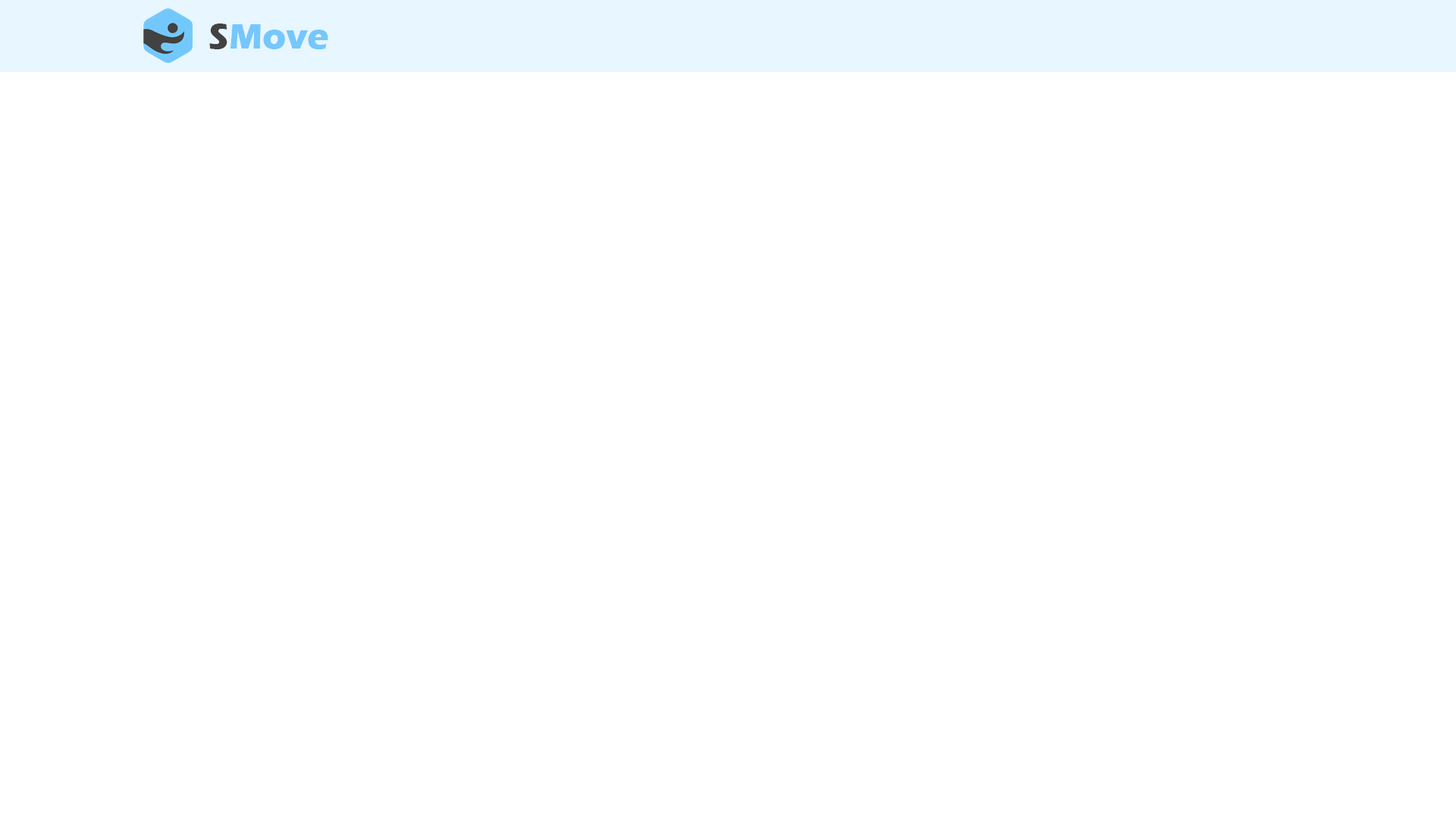
<style>
.page{position:relative;width:1456px;height:819px;background:#ffffff}
.page>*{position:absolute;margin:0}
.t1{font:36.4px "ErasITC-Bold";color:#75c7fd}
.t2{font:36.4px "ErasITC-Bold";color:#424242}
</style>
<div class="page">
<p class="t1" style="left:209px;top:24px;width:119px;height:25px"><span class="t2">S</span>Move</p>
</div>
